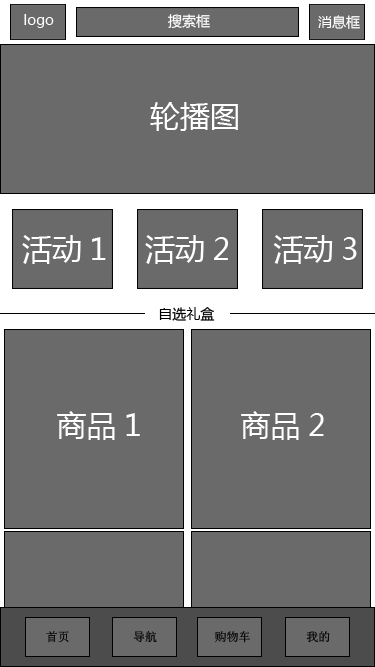
<style>
.page{position:relative;width:375px;height:667px;background:#6a6a6a}
.page>*{position:absolute;margin:0}
.t1{font:14px "MicrosoftYaHei";color:#ffffff}
.t2{font:30px "MicrosoftYaHei";color:#ffffff}
.t3{font:14px "MicrosoftYaHei";color:#000000}
</style>
<div class="page">
<p class="t1" style="left:24px;top:14px;width:30px;height:14px">logo</p>
<p class="t1" style="left:168px;top:14px;width:42px;height:15px">搜索框</p>
<p class="t1" style="left:318px;top:15px;width:42px;height:14px">消息框</p>
<p class="t2" style="left:150px;top:102px;width:88px;height:29px">轮播图</p>
<p class="t2" style="left:22px;top:235px;width:84px;height:29px">活动1</p>
<p class="t2" style="left:145px;top:235px;width:83px;height:29px">活动2</p>
<p class="t2" style="left:273px;top:235px;width:84px;height:29px">活动3</p>
<p class="t3" style="left:159px;top:307px;width:56px;height:14px">自选礼盒</p>
<p class="t2" style="left:57px;top:411px;width:83px;height:29px">商品1</p>
<p class="t2" style="left:241px;top:411px;width:83px;height:29px">商品2</p>
</div>
